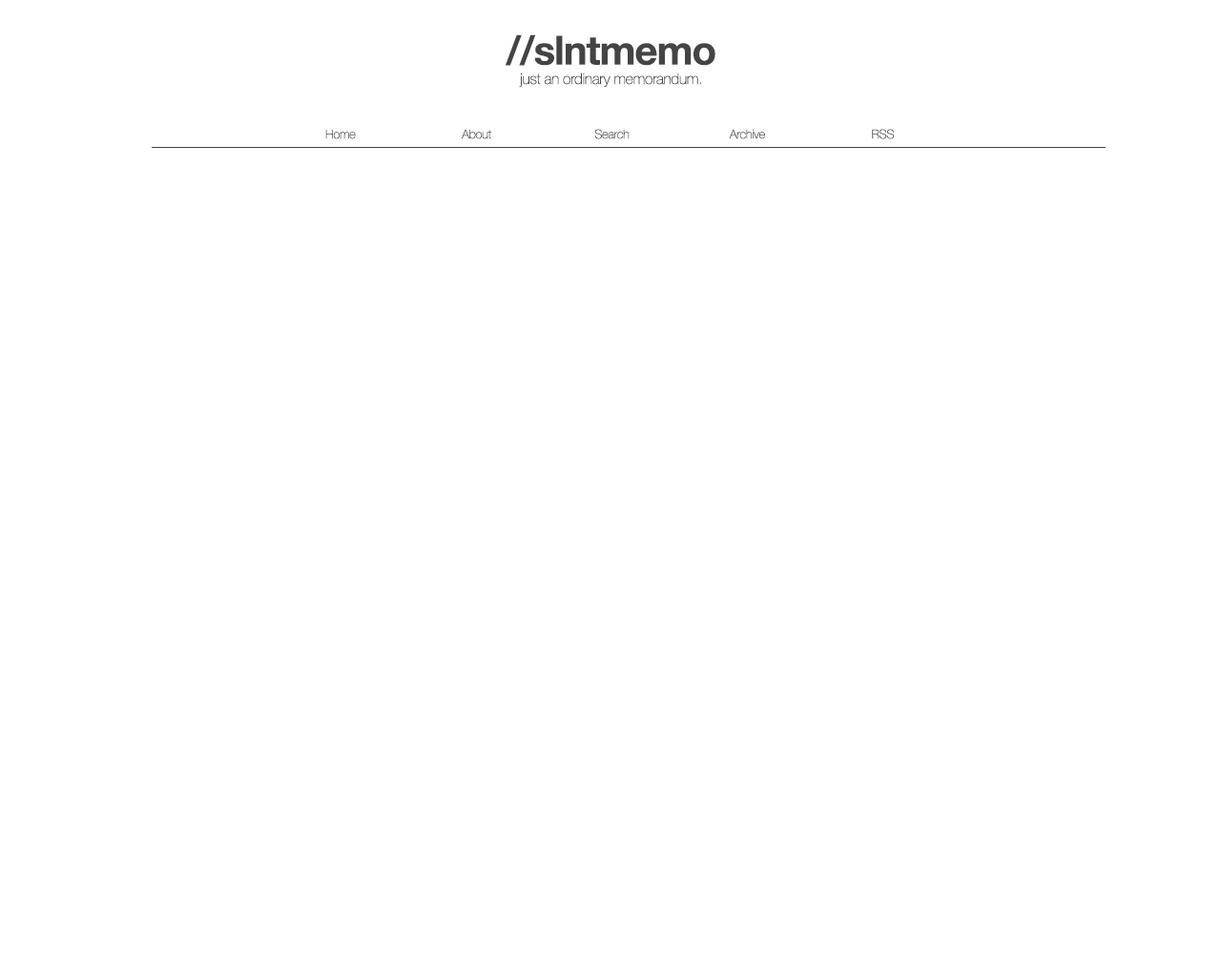
<style>
.page{position:relative;width:1221px;height:977px;background:#ffffff}
.page>*{position:absolute;margin:0}
.t1{font:40.1px "HelveticaNeue-Bold";letter-spacing:-0.025em;color:#444444}
.t2{font:15.3px "HelveticaNeue-Thin";letter-spacing:-0.025em;color:#444444}
.t3{font:12.4px "HelveticaNeue-Thin";letter-spacing:-0.025em;color:#555555}
.t4{font:12.4px "HelveticaNeue-Thin";letter-spacing:-0.025em}
.t5{font:12.4px "HelveticaNeue-Thin";letter-spacing:-0.025em;color:#444444}
</style>
<div class="page">
<p class="t1" style="left:506px;top:34px;width:209px;height:32px">//slntmemo</p>
<p class="t2" style="left:519px;top:72px;width:182px;height:16px">just an ordinary memorandum.</p>
<p class="t3" style="left:325px;top:129px;width:31px;height:10px">Home</p>
<p class="t4" style="left:462px;top:129px;width:29px;height:10px">About</p>
<p class="t5" style="left:594px;top:129px;width:36px;height:10px">Search</p>
<p class="t3" style="left:729px;top:129px;width:36px;height:10px">Archive</p>
<p class="t4" style="left:872px;top:129px;width:23px;height:10px">RSS</p>
</div>
